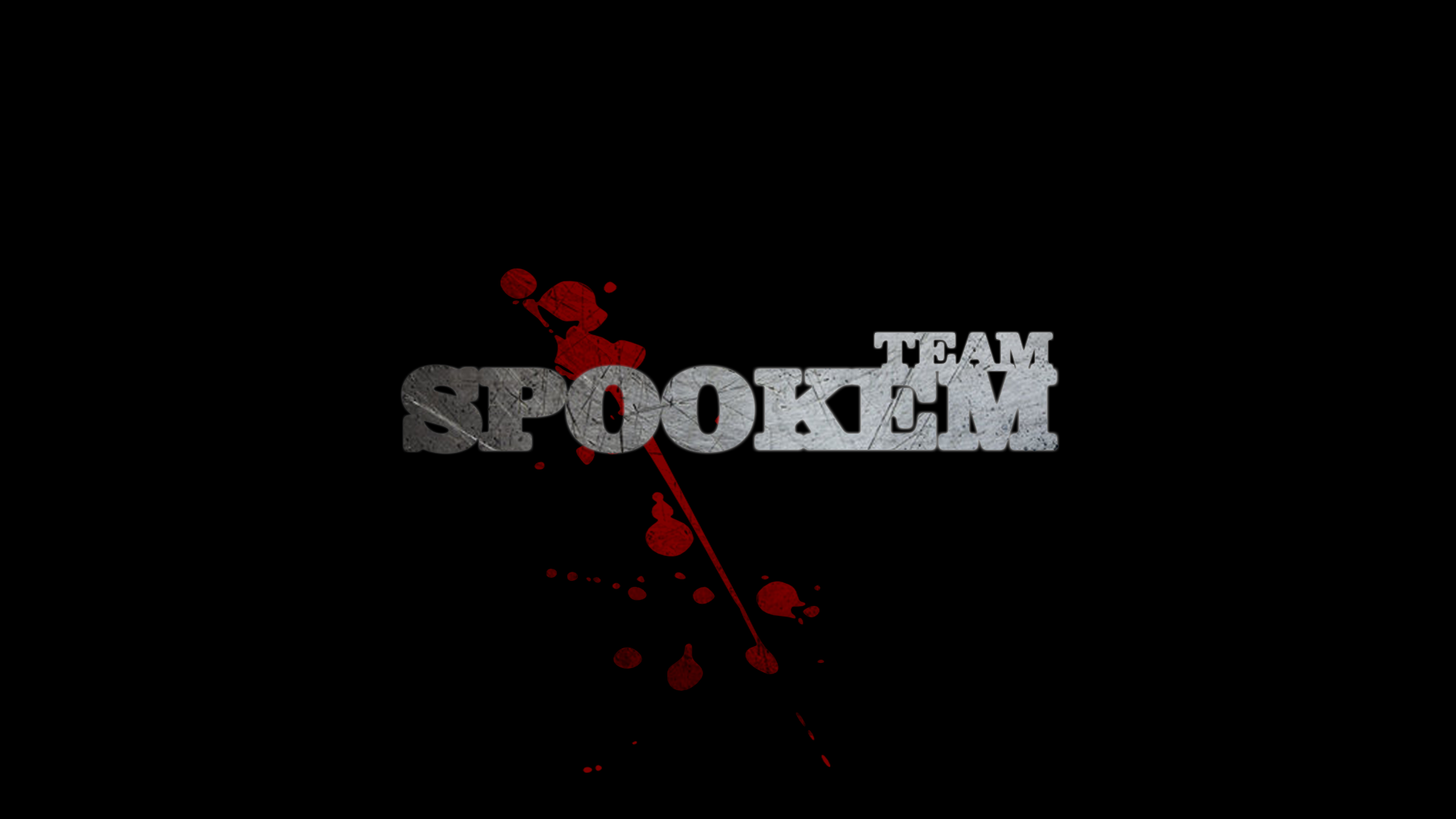
<style>
.page{position:relative;width:1456px;height:819px;background:#000000}
.page>*{position:absolute;margin:0}
.t1{font:54.6px "ClarendonBT-Black";color:#aeb2b6}
.t2{font:112.8px "ClarendonBT-Black"}
</style>
<div class="page">
<p class="t1" style="left:875px;top:333px;width:177px;height:37px">TEAM</p>
<p class="t2" style="left:405px;top:369px;width:650px;height:81px">SPOOKEM</p>
</div>
